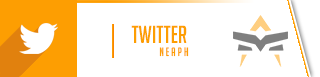
<style>
.page{position:relative;width:320px;height:77px;background:#ffffff}
.page>*{position:absolute;margin:0}
.t1{font:24px "BigNoodleTitling";color:#fd9e02}
.t2{font:11.8px "BigNoodleTitling";letter-spacing:0.2em;color:#fd9e02;scale:0.92 1}
</style>
<div class="page">
<p class="t1" style="left:131px;top:25px;width:56px;height:18px">Twitter</p>
<p class="t2" style="left:159px;top:47px;width:30px;height:10px">NEAPH</p>
</div>
